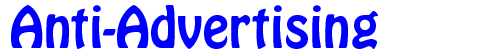
<style>
.page{position:relative;width:500px;height:55px;background:#ffffff}
.page>*{position:absolute;margin:0}
.t1{font:50px "HoboStd";color:#0000ff}
</style>
<div class="page">
<p class="t1" style="left:11px;top:5px;width:367px;height:44px">Anti-Advertising</p>
</div>
